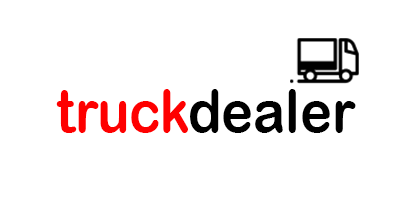
<style>
.page{position:relative;width:400px;height:200px;background:#ffffff}
.page>*{position:absolute;margin:0}
.t1{font:61.4px "ArialRoundedMTBold";color:#000000;scale:0.87 1}
.t2{font:61.4px "ArialRoundedMTBold";color:#fe0000;scale:0.87 1}
</style>
<div class="page">
<p class="t1" style="left:56px;top:89px;width:300px;height:44px"><span class="t2">truck</span>dealer</p>
</div>
